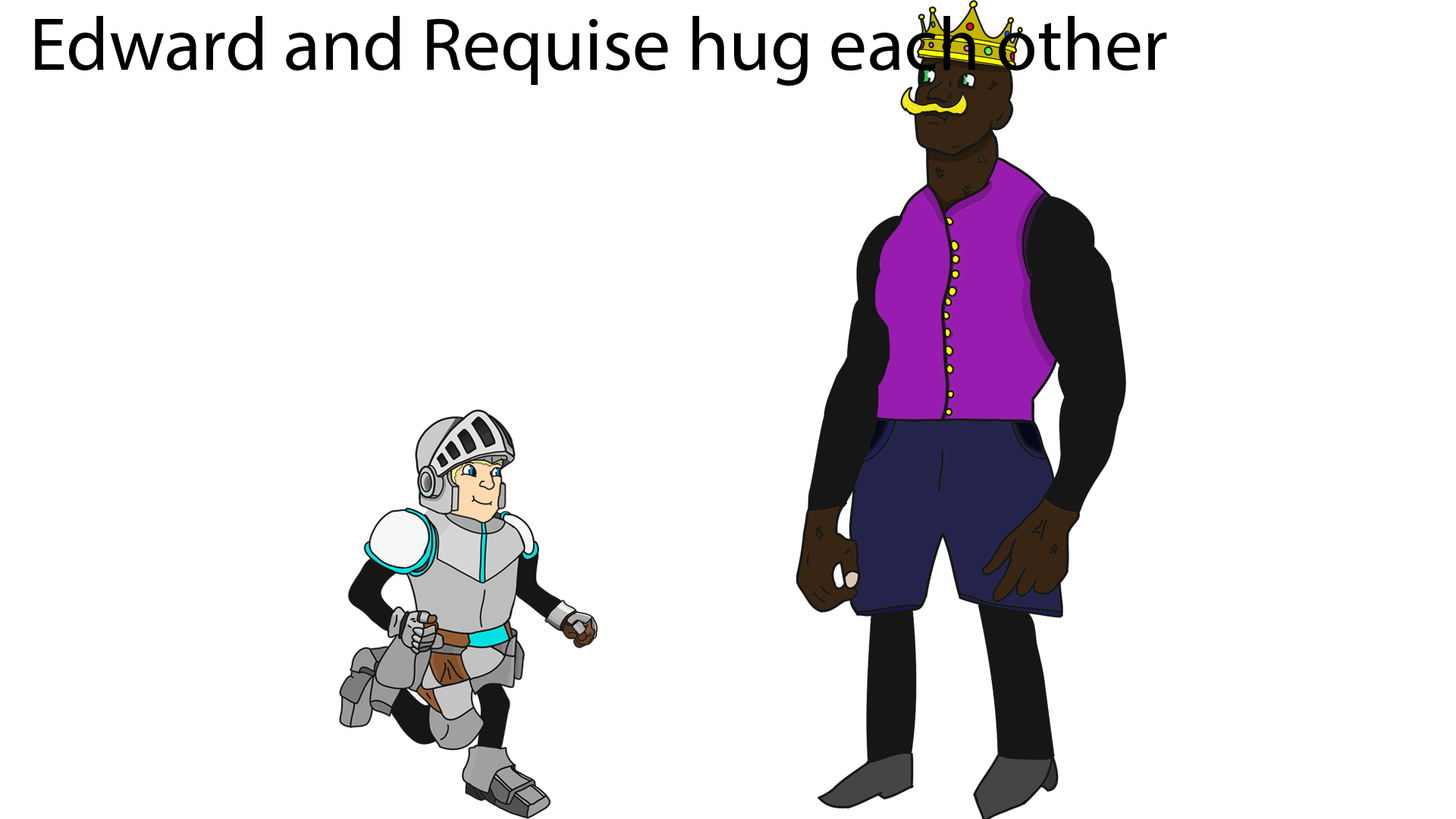
<style>
.page{position:relative;width:1456px;height:819px;background:#ffffff}
.page>*{position:absolute;margin:0}
.t1{font:75.8px "MyriadPro-Regular";color:#000000}
</style>
<div class="page">
<p class="t1" style="left:35px;top:16px;width:1132px;height:70px">Edward and Requise hug each other</p>
</div>
